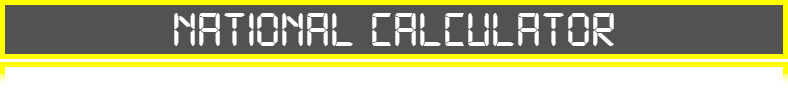
<style>
.page{position:relative;width:788px;height:88px;background:#525252}
.page>*{position:absolute;margin:0}
.t1{font:53px "Digital-7";color:#ffffff}
</style>
<div class="page">
<p class="t1" style="left:174px;top:13px;width:440px;height:33px">NATIONAL CALCULATOR</p>
</div>
